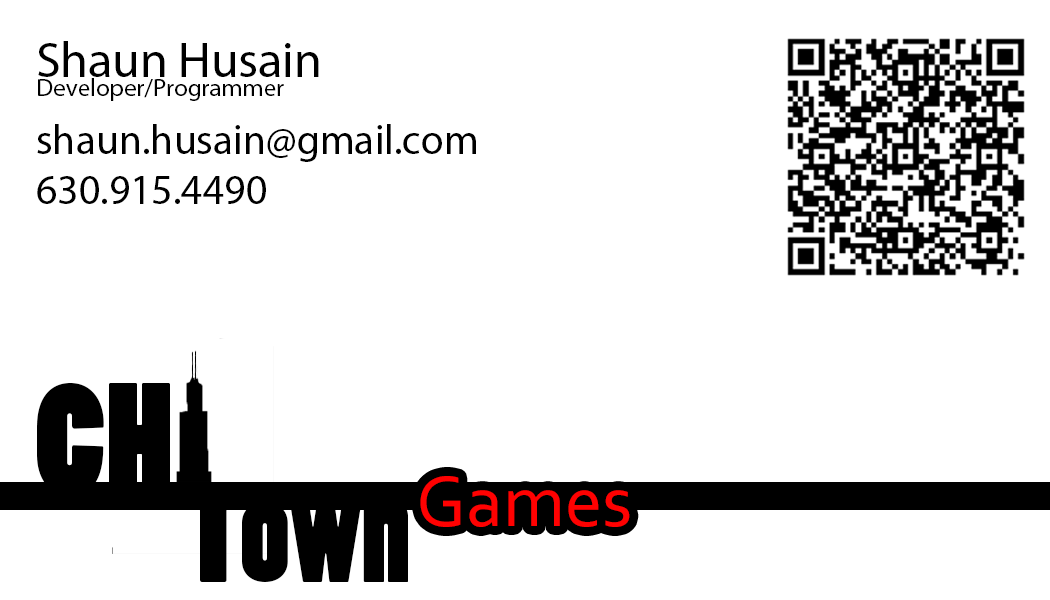
<style>
.page{position:relative;width:1050px;height:600px;background:#ffffff}
.page>*{position:absolute;margin:0}
.t1{font:50px "MyriadPro-Regular";color:#000000}
.t2{font:25px "MyriadPro-Regular";color:#000000}
.t3{font:41.7px "MyriadPro-Regular";color:#000000}
.t4{font:150px "PoplarStd";color:#000000}
.t5{font:133.3px "PoplarStd";color:#000000}
.t6{font:75px "Corbel";color:#ff0101}
</style>
<div class="page">
<p class="t1" style="left:38px;top:41px;width:281px;height:36px">Shaun Husain</p>
<p class="t2" style="left:38px;top:78px;width:246px;height:23px">Developer/Programmer</p>
<p class="t3" style="left:37px;top:124px;width:439px;height:80px">shaun.husain@gmail.com<br>630.915.4490</p>
<p class="t4" style="left:37px;top:383px;width:133px;height:113px">CH</p>
<p class="t5" style="left:183px;top:482px;width:225px;height:100px">Town</p>
<p class="t6" style="left:420px;top:476px;width:210px;height:51px">Games</p>
</div>
